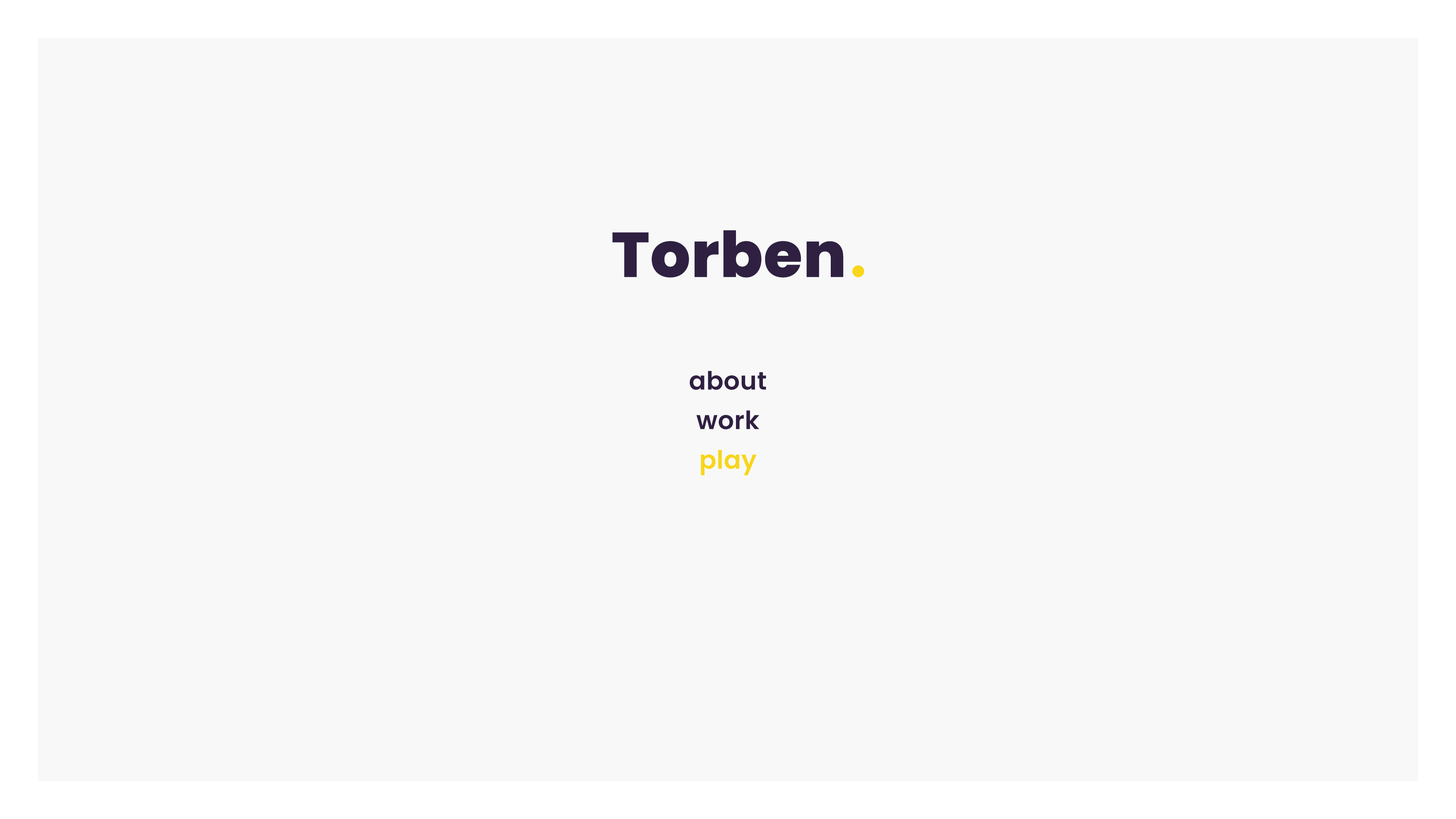
<style>
.page{position:relative;width:1456px;height:819px;background:#f8f8f8}
.page>*{position:absolute;margin:0}
.t1{font:63.2px "Poppins-ExtraBold";letter-spacing:0.01em;color:#2f2042}
.t2{font:25.3px/39.5px "Poppins-SemiBold";letter-spacing:0.01em;color:#2f2042}
.t3{font:25.3px/39.5px "Poppins-SemiBold";letter-spacing:0.01em;color:#f8d619}
</style>
<div class="page">
<p class="t1" style="left:612px;top:230px;width:231px;height:48px">Torben</p>
<p class="t2" style="left:690px;top:371px;width:76px;height:104px;text-align:center">about<br>work<br><span class="t3">play</span></p>
</div>
